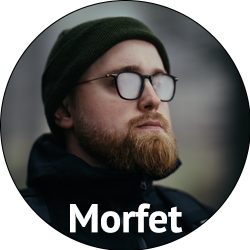
<style>
.page{position:relative;width:250px;height:250px;background:#ffffff}
.page>*{position:absolute;margin:0}
.t1{font:40px "PTSans-Bold";color:#ffffff}
</style>
<div class="page">
<p class="t1" style="left:70px;top:203px;width:113px;height:30px">Morfet</p>
</div>
